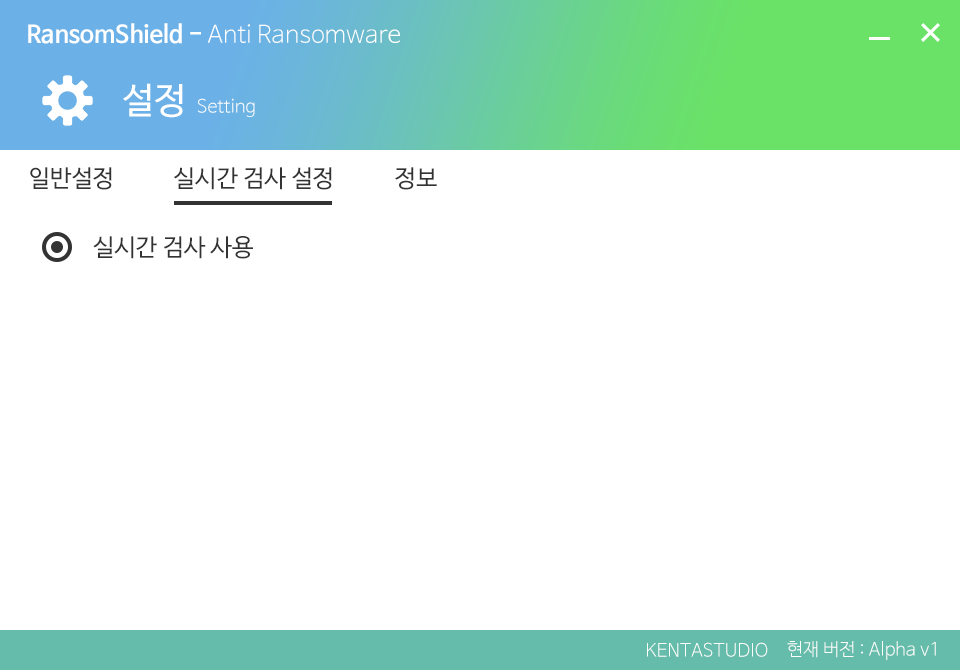
<style>
.page{position:relative;width:960px;height:670px;background:#ffffff}
.page>*{position:absolute;margin:0}
.t1{font:24px "NanumBarunGothicLight";color:#ffffff}
.t2{font:24px "NanumBarunGothicBold";color:#ffffff}
.t3{font:36px "NanumBarunGothic";color:#ffffff}
.t4{font:18px "NanumBarunGothicLight";color:#ffffff}
.t5{font:24px "NanumBarunGothic";color:#333333}
.t6{font:18px "NanumBarunGothicLight";color:#fefefe}
</style>
<div class="page">
<p class="t1" style="left:28px;top:23px;width:372px;height:21px"><span class="t2">RansomShield - </span>Anti Ransomware</p>
<p class="t3" style="left:123px;top:83px;width:60px;height:35px">설정</p>
<p class="t4" style="left:198px;top:98px;width:57px;height:19px">Setting</p>
<p class="t5" style="left:30px;top:167px;width:82px;height:23px">일반설정</p>
<p class="t5" style="left:174px;top:167px;width:158px;height:23px">실시간 검사 설정</p>
<p class="t5" style="left:395px;top:167px;width:42px;height:23px">정보</p>
<p class="t5" style="left:93px;top:236px;width:160px;height:23px">실시간 검사 사용</p>
<p class="t6" style="left:787px;top:641px;width:149px;height:19px">현재 버전 : Alpha v1</p>
<p class="t6" style="left:647px;top:642px;width:121px;height:15px">KENTASTUDIO</p>
</div>
